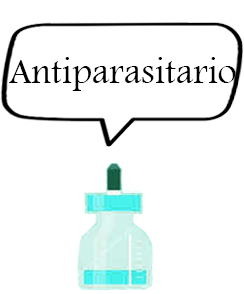
<style>
.page{position:relative;width:244px;height:294px;background:#ffffff}
.page>*{position:absolute;margin:0}
.t1{font:37px "FootlightMTLight";color:#000000}
</style>
<div class="page">
<p class="t1" style="left:9px;top:57px;width:227px;height:34px">Antiparasitario</p>
</div>
